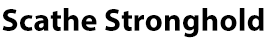
<style>
.page{position:relative;width:267px;height:41px;background:#ffffff}
.page>*{position:absolute;margin:0}
.t1{font:32px "MyriadPro-Bold";color:#000000}
</style>
<div class="page">
<p class="t1" style="left:2px;top:8px;width:262px;height:30px">Scathe Stronghold</p>
</div>
